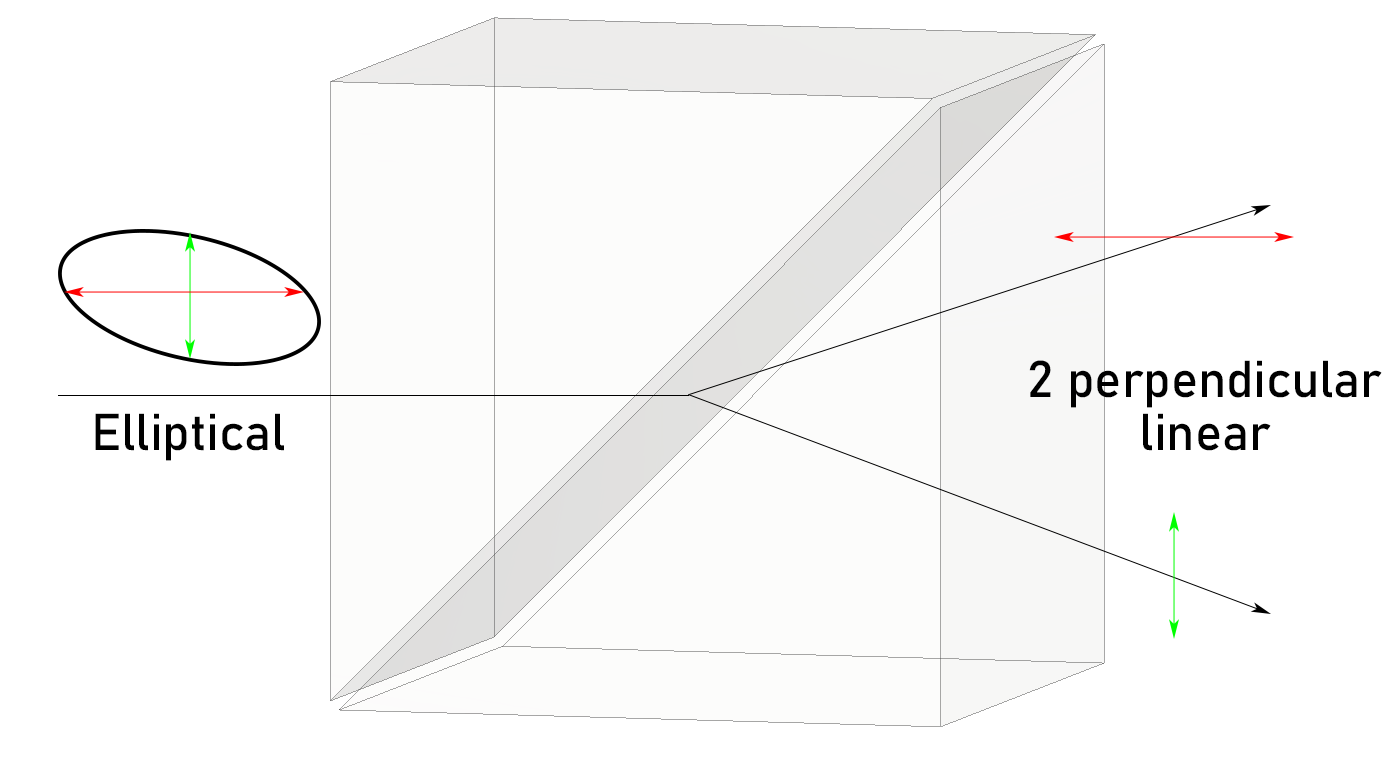
<style>
.page{position:relative;width:1391px;height:770px;background:#ffffff}
.page>*{position:absolute;margin:0}
.t1{font:51px/53.3px "Bahnschrift";letter-spacing:-0.005em;color:#000000}
.t2{font:51px "Bahnschrift";letter-spacing:-0.005em;color:#000000}
</style>
<div class="page">
<p class="t1" style="left:1029px;top:360px;width:353px;height:91px;text-align:center">2 perpendicular<br>linear</p>
<p class="t2" style="left:95px;top:413px;width:189px;height:48px">Elliptical</p>
</div>
